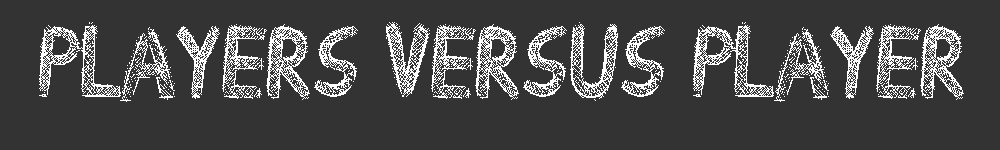
<style>
.page{position:relative;width:1000px;height:150px;background:#333333}
.page>*{position:absolute;margin:0}
.t1{font:100px "Drawing-Guides";color:#ffffff}
</style>
<div class="page">
<p class="t1" style="left:39px;top:22px;width:925px;height:80px">Players Versus Player</p>
</div>
